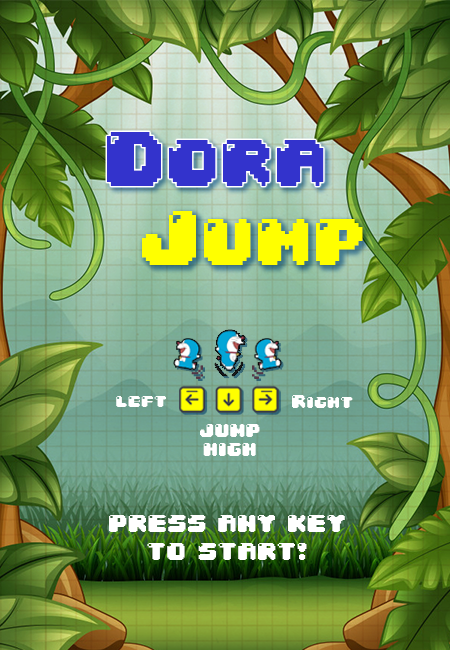
<style>
.page{position:relative;width:450px;height:650px}
.page>*{position:absolute;margin:0}
.t1{font:65.6px "04b30";color:#3333cc}
.t2{font:65.6px "04b30";color:#ffff00}
.t3{font:16px "04b30";color:#ffffff}
.t4{font:21px/28px "04b30";color:#ffffff}
</style>
<div class="page">
<p class="t1" style="left:107px;top:132px;width:217px;height:54px">Dora</p>
<p class="t2" style="left:142px;top:211px;width:221px;height:54px"><span class="t1"><br>   </span>Jump</p>
<p class="t3" style="left:116px;top:396px;width:50px;height:11px">left</p>
<p class="t3" style="left:292px;top:395px;width:61px;height:13px">Right</p>
<p class="t3" style="left:200px;top:424px;width:60px;height:32px;text-align:center">JUMP<br>HIGH</p>
<p class="t4" style="left:109px;top:515px;width:236px;height:45px;text-align:center">PRESS  ANY  KEY<br>TO  START!</p>
</div>
